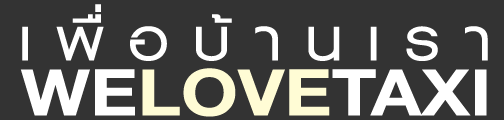
<style>
.page{position:relative;width:504px;height:120px;background:#333333}
.page>*{position:absolute;margin:0}
.t1{font:83.7px "PSLKittithadaADBold";color:#ffffff;scale:1.08 1}
.t2{font:97.6px "PSLTextADBold";color:#fffcd5;scale:1.16 1}
.t3{font:97.6px "PSLTextADBold";color:#ffffff;scale:1.16 1}
</style>
<div class="page">
<p class="t1" style="left:22px;top:4px;width:466px;height:57px">à ¾×è Í º Ò ¹ à Ã Ò</p>
<p class="t2" style="left:20px;top:68px;width:467px;height:49px"><span class="t3">WE</span>LOVE<span class="t3">TAXI</span></p>
</div>
